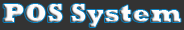
<style>
.page{position:relative;width:184px;height:30px;background:#333333}
.page>*{position:absolute;margin:0}
.t1{font:26px "Rockwell-ExtraBold";color:#fdfcfc}
</style>
<div class="page">
<p class="t1" style="left:3px;top:4px;width:178px;height:23px">POS System</p>
</div>
